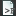
<style>
.page{position:relative;width:16px;height:16px;background:#333333}
.page>*{position:absolute;margin:0}
.t1{font:9px "Courier";color:#555555}
</style>
<div class="page">
<p class="t1" style="left:5px;top:8px;width:11px;height:6px">&gt;F</p>
</div>
